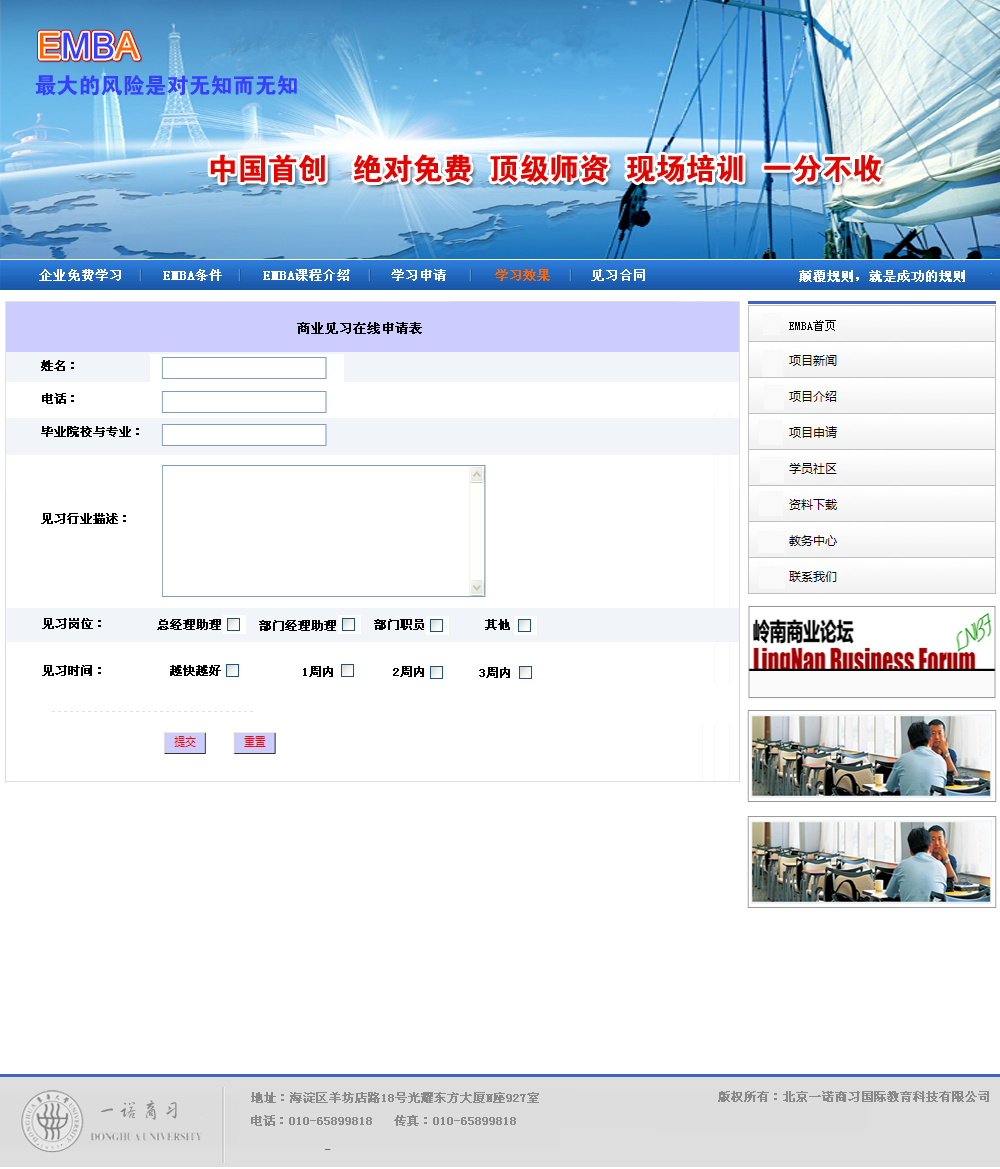
<style>
.page{position:relative;width:1000px;height:1169px;background:#ffffff}
.page>*{position:absolute;margin:0}
.t1{font:22px "FZDHTJW--GB1-0";color:#363fff}
.t2{font:30px "FZDHTJW--GB1-0";color:#e10602}
.t3{font:13px "SimSun";color:#fdfdfe;font-weight:bold}
.t4{font:13px "SimSun";color:#fffdfd;font-weight:bold}
.t5{font:13px "SimSun";color:#ff6600;font-weight:bold}
.t6{font:13px "SimSun";color:#fbfbfc;font-weight:bold}
.t7{font:13px "SimSun";color:#020202;font-weight:bold}
.t8{font:12px "SimSun";color:#020202;font-weight:bold}
.t9{font:12px "SimSun";color:#898989;font-weight:bold}
.t10{font:22px "FZHCJW--GB1-0";color:#898989}
</style>
<div class="page">
<p class="t1" style="left:35px;top:75px;width:262px;height:21px">最大的风险是对无知而无知</p>
<p class="t2" style="left:210px;top:154px;width:671px;height:29px">中国首创   绝对免费  顶级师资  现场培训  一分不收</p>
<p class="t3" style="left:39px;top:269px;width:606px;height:12px"><span class="t4">企业免费学习</span>     EMBA条件     EMBA课程介绍     学习申请      <span class="t5">学习效果</span>     见习合同</p>
<p class="t6" style="left:799px;top:270px;width:166px;height:12px">颠覆规则，就是成功的规则</p>
<p class="t7" style="left:297px;top:322px;width:125px;height:12px">商业见习在线申请表</p>
<p class="t8" style="left:41px;top:360px;width:33px;height:11px">姓名：</p>
<p class="t8" style="left:42px;top:393px;width:32px;height:11px">电话：</p>
<p class="t8" style="left:41px;top:426px;width:98px;height:11px">毕业院校与专业：</p>
<p class="t8" style="left:41px;top:513px;width:85px;height:11px">见习行业描述：</p>
<p class="t8" style="left:42px;top:618px;width:59px;height:11px">见习岗位：</p>
<p class="t8" style="left:157px;top:619px;width:64px;height:11px">总经理助理</p>
<p class="t8" style="left:259px;top:620px;width:77px;height:11px">部门经理助理</p>
<p class="t8" style="left:374px;top:619px;width:50px;height:11px">部门职员</p>
<p class="t8" style="left:485px;top:619px;width:25px;height:11px">其他</p>
<p class="t8" style="left:42px;top:665px;width:59px;height:11px">见习时间：</p>
<p class="t8" style="left:170px;top:665px;width:51px;height:11px">越快越好</p>
<p class="t8" style="left:303px;top:666px;width:30px;height:11px">1周内</p>
<p class="t8" style="left:393px;top:666px;width:31px;height:11px">2周内</p>
<p class="t8" style="left:479px;top:667px;width:31px;height:11px">3周内</p>
<p class="t9" style="left:251px;top:1092px;width:288px;height:11px">地址：海淀区羊坊店路18号光耀东方大厦N座927室</p>
<p class="t9" style="left:718px;top:1091px;width:271px;height:11px">版权所有：北京一诺商习国际教育科技有限公司</p>
<p class="t10" style="left:100px;top:1100px;width:77px;height:20px">一诺商习</p>
<p class="t9" style="left:251px;top:1115px;width:265px;height:11px">电话：010-65899818   传真：010-65899818</p>
</div>
